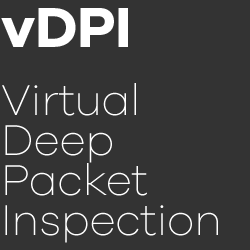
<style>
.page{position:relative;width:250px;height:250px;background:#333333}
.page>*{position:absolute;margin:0}
.t1{font:58.5px "GalanoGrotesque-Bold";letter-spacing:-0.01em;color:#ffffff}
.t2{font:44.5px/40px "GalanoGrotesque-ExtraLight";letter-spacing:-0.01em;color:#ffffff}
</style>
<div class="page">
<p class="t1" style="left:1px;top:8px;width:127px;height:39px">vDPI</p>
<p class="t2" style="left:2px;top:83px;width:216px;height:160px">Virtual<br>Deep <br>Packet <br>Inspection</p>
</div>
